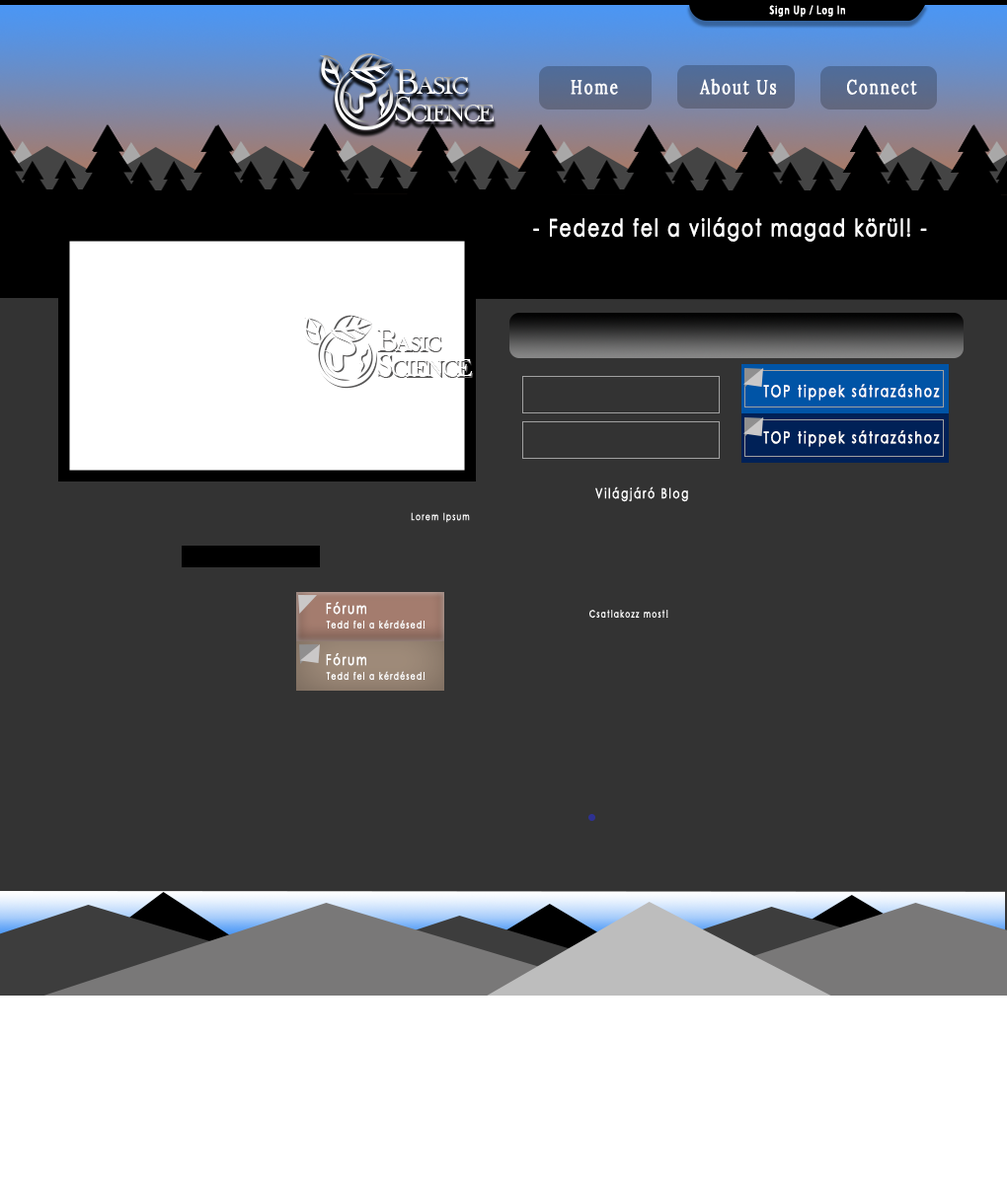
<style>
.page{position:relative;width:1007px;height:1184px;background:#333333}
.page>*{position:absolute;margin:0}
.t1{font:11.8px "MyriadPro-Regular";letter-spacing:0.1em;color:#ffffff;font-weight:bold;scale:0.75 1}
.t2{font:19.7px "Lora-Regular";letter-spacing:0.1em;color:#ffffff;font-weight:bold;scale:0.75 1}
.t3{font:23.7px "CenturyGothic";letter-spacing:0.1em;color:#ffffff;font-weight:bold;scale:0.75 1}
.t4{font:15.8px "CenturyGothic";letter-spacing:0.15em;color:#ffffff;font-weight:bold;scale:0.75 1}
.t5{font:13.8px "CenturyGothic";letter-spacing:0.15em;color:#ffffff;font-weight:bold;scale:0.75 1}
.t6{font:9.9px "CenturyGothic";letter-spacing:0.15em;color:#ffffff;font-weight:bold;scale:0.75 1}
.t7{font:14.8px "CenturyGothic";letter-spacing:0.15em;color:#ffffff;font-weight:bold;scale:0.75 1}
</style>
<div class="page">
<p class="t1" style="left:769px;top:5px;width:76px;height:12px">Sign Up / Log In</p>
<p class="t2" style="left:699px;top:78px;width:78px;height:17px">About Us</p>
<p class="t2" style="left:570px;top:80px;width:48px;height:15px">Home</p>
<p class="t2" style="left:847px;top:79px;width:70px;height:16px">Connect</p>
<p class="t3" style="left:533px;top:217px;width:394px;height:25px">- Fedezd fel a világot magad körül! -</p>
<p class="t4" style="left:763px;top:384px;width:177px;height:17px">TOP tippek sátrazáshoz</p>
<p class="t4" style="left:763px;top:430px;width:177px;height:17px">TOP tippek sátrazáshoz</p>
<p class="t5" style="left:595px;top:487px;width:93px;height:15px">Világjáró Blog</p>
<p class="t6" style="left:411px;top:512px;width:59px;height:11px">Lorem Ipsum</p>
<p class="t7" style="left:326px;top:602px;width:40px;height:13px">Fórum</p>
<p class="t6" style="left:589px;top:610px;width:79px;height:9px">Csatlakozz most!</p>
<p class="t6" style="left:326px;top:620px;width:99px;height:9px">Tedd fel a kérdésed!</p>
<p class="t7" style="left:326px;top:653px;width:40px;height:13px">Fórum</p>
<p class="t6" style="left:326px;top:671px;width:99px;height:9px">Tedd fel a kérdésed!</p>
</div>
